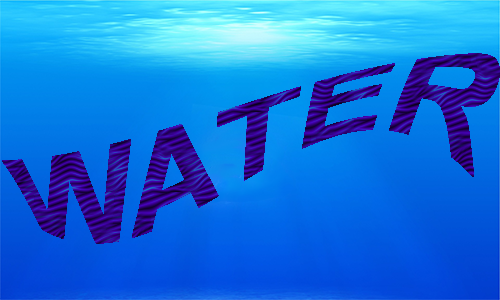
<style>
.page{position:relative;width:500px;height:300px}
.page>*{position:absolute;margin:0}
.t1{font:125px "Arial-BoldMT";scale:0.95 1}
</style>
<div class="page">
<p class="t1" style="left:2px;top:53px;width:498px;height:191px">WATER</p>
</div>
